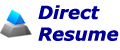
<style>
.page{position:relative;width:120px;height:50px;background:#ffffff}
.page>*{position:absolute;margin:0}
.t1{font:18px "Verdana-BoldItalic";color:#000099}
</style>
<div class="page">
<p class="t1" style="left:38px;top:5px;width:81px;height:36px">Direct<br>Resume</p>
</div>
